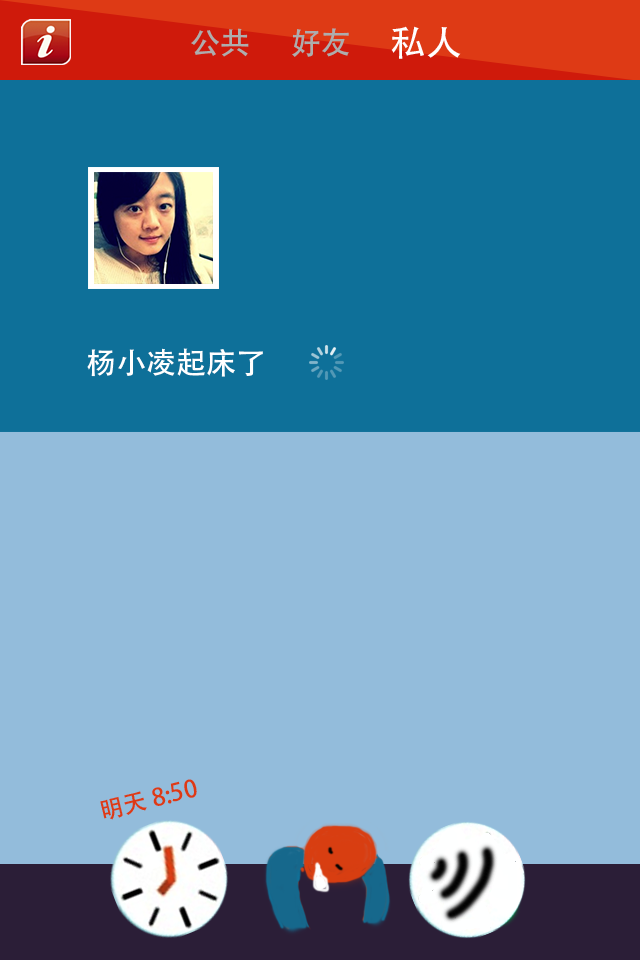
<style>
.page{position:relative;width:640px;height:960px;background:#93bcdb}
.page>*{position:absolute;margin:0}
.t1{font:30px "AdobeHeitiStd-Regular";color:#adadad}
.t2{font:36px "AdobeHeitiStd-Regular";color:#ffffff}
.t3{font:30px "AdobeHeitiStd-Regular";color:#ffffff}
.t4{font:24px "AdobeHeitiStd-Regular";color:#de3a15}
</style>
<div class="page">
<p class="t1" style="left:191px;top:28px;width:58px;height:29px">公共</p>
<p class="t1" style="left:292px;top:28px;width:57px;height:29px">好友</p>
<p class="t2" style="left:391px;top:26px;width:70px;height:33px">私人</p>
<p class="t3" style="left:87px;top:348px;width:176px;height:29px">杨小凌起床了</p>
<p class="t4" style="left:100px;top:779px;width:97px;height:41px;rotate:-14deg">明天 8:50</p>
</div>
